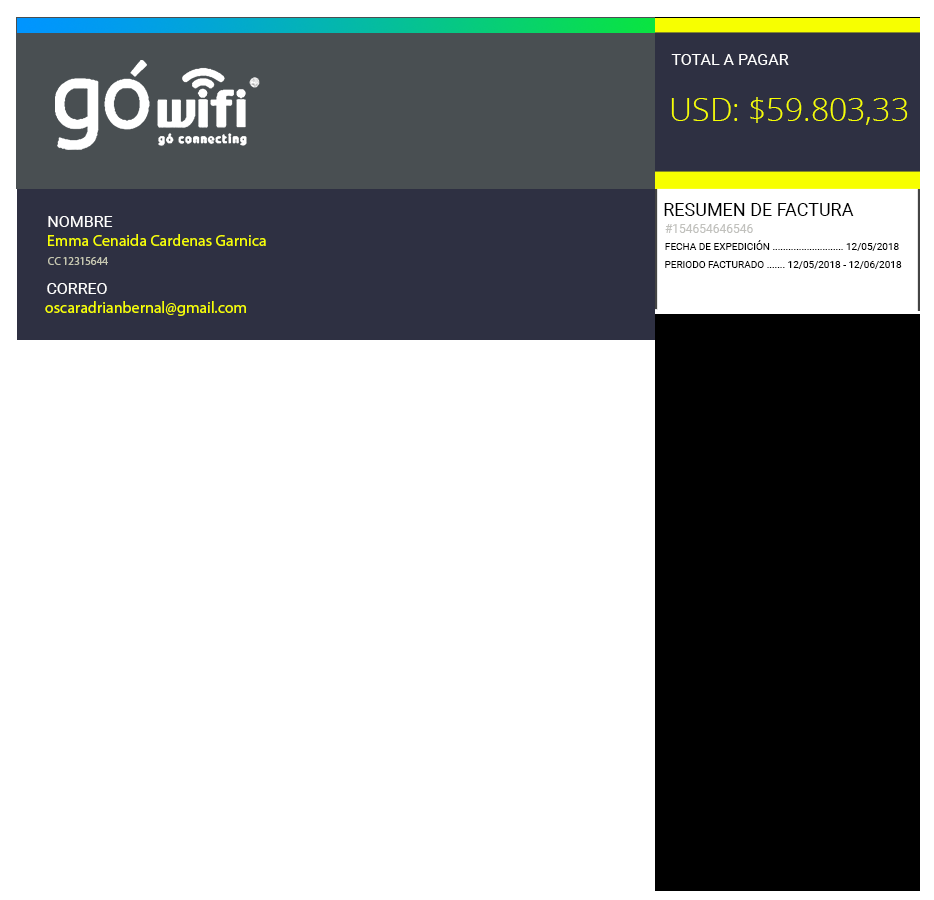
<style>
.page{position:relative;width:934px;height:900px;background:#ffffff}
.page>*{position:absolute;margin:0}
.t1{font:16px "Roboto-Regular";color:#ffffff}
.t2{font:32px "OpenSans-Light";color:#f7ff00}
.t3{font:18px "Roboto-Regular";color:#000000}
.t4{font:12px "Roboto-Regular";color:#c1c1bd}
.t5{font:16px "MyriadPro-Regular";color:#f7ff00}
.t6{font:10px "Roboto-Regular";color:#000000}
.t7{font:11px "MyriadPro-Regular";color:#c5c6b1}
</style>
<div class="page">
<p class="t1" style="left:671px;top:54px;width:118px;height:11px">TOTAL A PAGAR</p>
<p class="t2" style="left:671px;top:97px;width:237px;height:28px">USD: $59.803,33</p>
<p class="t3" style="left:664px;top:203px;width:190px;height:13px">RESUMEN DE FACTURA</p>
<p class="t1" style="left:48px;top:216px;width:65px;height:11px">NOMBRE</p>
<p class="t4" style="left:665px;top:224px;width:88px;height:9px">#154654646546</p>
<p class="t5" style="left:48px;top:234px;width:218px;height:12px">Emma Cenaida Cardenas Garnica</p>
<p class="t6" style="left:665px;top:240px;width:234px;height:11px">FECHA DE EXPEDICIÓN ........................... 12/05/2018</p>
<p class="t7" style="left:48px;top:257px;width:60px;height:8px">CC 12315644</p>
<p class="t6" style="left:665px;top:261px;width:237px;height:8px">PERIODO FACTURADO ....... 12/05/2018 - 12/06/2018</p>
<p class="t1" style="left:47px;top:283px;width:60px;height:11px">CORREO</p>
<p class="t5" style="left:45px;top:301px;width:201px;height:15px">oscaradrianbernal@gmail.com</p>
</div>
